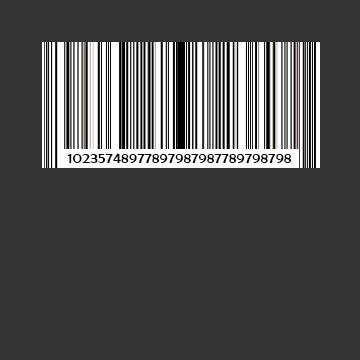
<style>
.page{position:relative;width:360px;height:360px;background:#333333}
.page>*{position:absolute;margin:0}
.t1{font:16.5px "BerlinSansFB-Reg";color:#000000}
</style>
<div class="page">
<p class="t1" style="left:67px;top:153px;width:225px;height:10px">10235748977897987987789798798</p>
</div>
